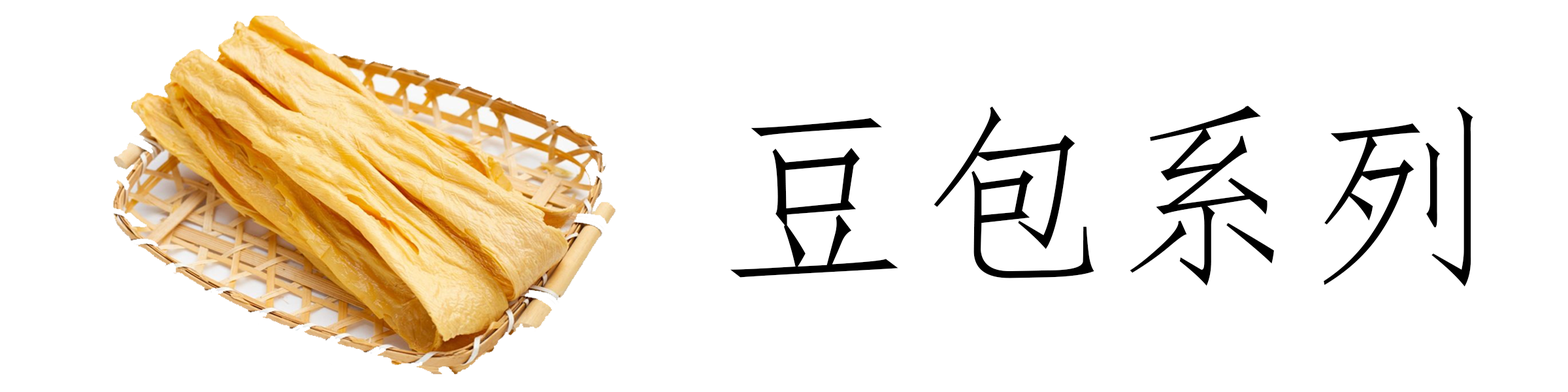
<style>
.page{position:relative;width:1568px;height:392px;background:#ffffff}
.page>*{position:absolute;margin:0}
.t1{font:196px "FangSong";color:#000000}
</style>
<div class="page">
<p class="t1" style="left:730px;top:105px;width:743px;height:182px">豆包系列</p>
</div>
